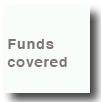
<style>
.page{position:relative;width:101px;height:102px;background:#f8fdfa}
.page>*{position:absolute;margin:0}
.t1{font:14px/18px "Helvetica-Bold";letter-spacing:0.075em;color:#7d7676}
</style>
<div class="page">
<p class="t1" style="left:7px;top:39px;width:60px;height:28px">Funds <br>covered</p>
</div>
